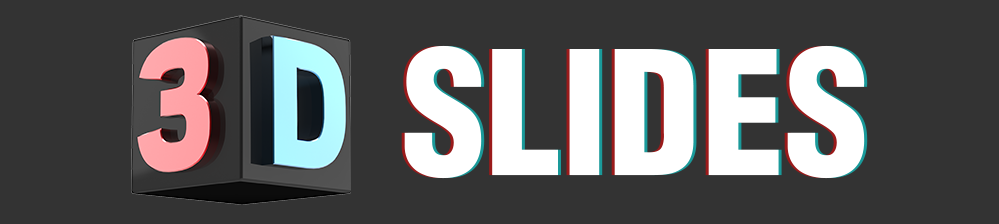
<style>
.page{position:relative;width:999px;height:224px;background:#333333}
.page>*{position:absolute;margin:0}
.t1{font:168px "Helvetica-CondensedBlack";color:#ffffff}
</style>
<div class="page">
<p class="t1" style="left:404px;top:45px;width:461px;height:134px">SLIDES</p>
</div>
